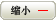
<style>
.page{position:relative;width:56px;height:20px}
.page>*{position:absolute;margin:0}
.t1{font:10px "SimSun";color:#000000}
</style>
<div class="page">
<p class="t1" style="left:11px;top:5px;width:20px;height:11px">缩小</p>
</div>
